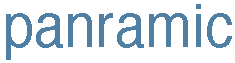
<style>
.page{position:relative;width:235px;height:63px;background:#ffffff}
.page>*{position:absolute;margin:0}
.t1{font:58.8px "Helvetica";color:#4f7fa3;scale:0.95 1}
</style>
<div class="page">
<p class="t1" style="left:6px;top:4px;width:226px;height:56px">panramic</p>
</div>
